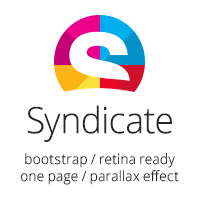
<style>
.page{position:relative;width:200px;height:200px;background:#ffffff}
.page>*{position:absolute;margin:0}
.t1{font:36.4px "OpenSans-Light";letter-spacing:-0.025em;color:#25272b;scale:0.96 1}
.t2{font:14px "OpenSans-Light";scale:0.96 1}
</style>
<div class="page">
<p class="t1" style="left:27px;top:105px;width:145px;height:37px">Syndicate</p>
<p class="t2" style="left:20px;top:153px;width:159px;height:32px;text-align:center">bootstrap / retina ready<br>one page / parallax effect</p>
</div>
